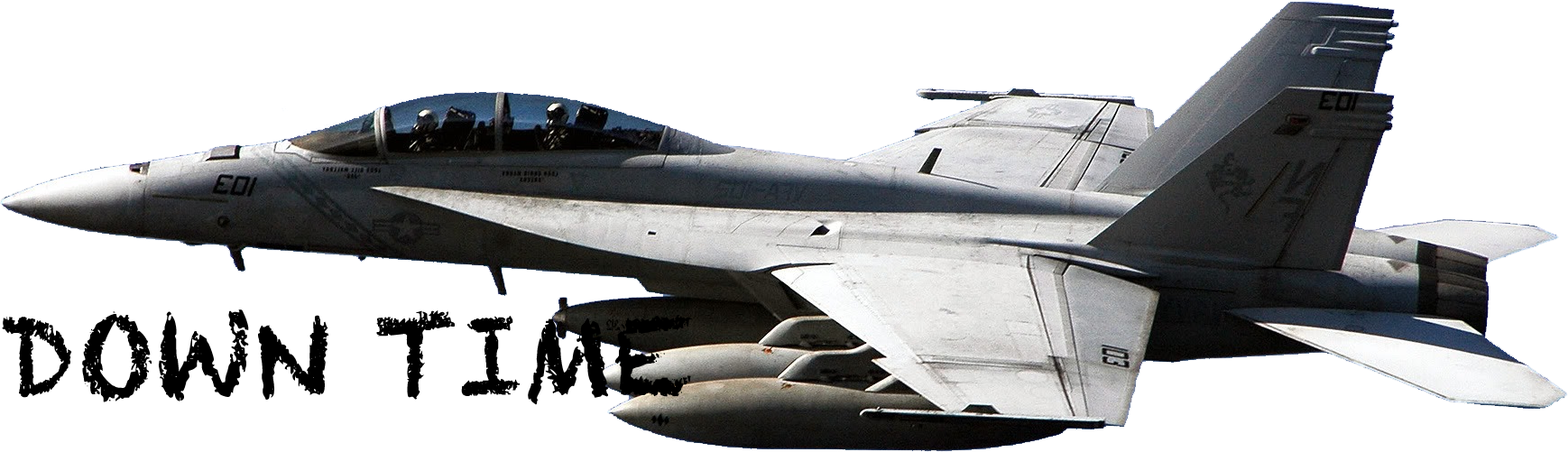
<style>
.page{position:relative;width:1568px;height:452px;background:#ffffff}
.page>*{position:absolute;margin:0}
.t1{font:108.3px "Chalkduster";color:#000000}
</style>
<div class="page">
<p class="t1" style="left:2px;top:309px;width:690px;height:96px">DOWN TIME</p>
</div>
